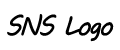
<style>
.page{position:relative;width:120px;height:50px;background:#ffffff}
.page>*{position:absolute;margin:0}
.t1{font:26.7px "MVBoli";letter-spacing:-0.085em;color:#000000}
</style>
<div class="page">
<p class="t1" style="left:7px;top:14px;width:107px;height:28px">SNS Logo</p>
</div>
